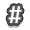
<style>
.page{position:relative;width:30px;height:30px;background:#ffffff}
.page>*{position:absolute;margin:0}
.t1{font:23.5px "PingFangHK-Semibold";color:#ffffff;text-transform:uppercase}
</style>
<div class="page">
<p class="t1" style="left:8px;top:6px;width:14px;height:17px">#</p>
</div>
